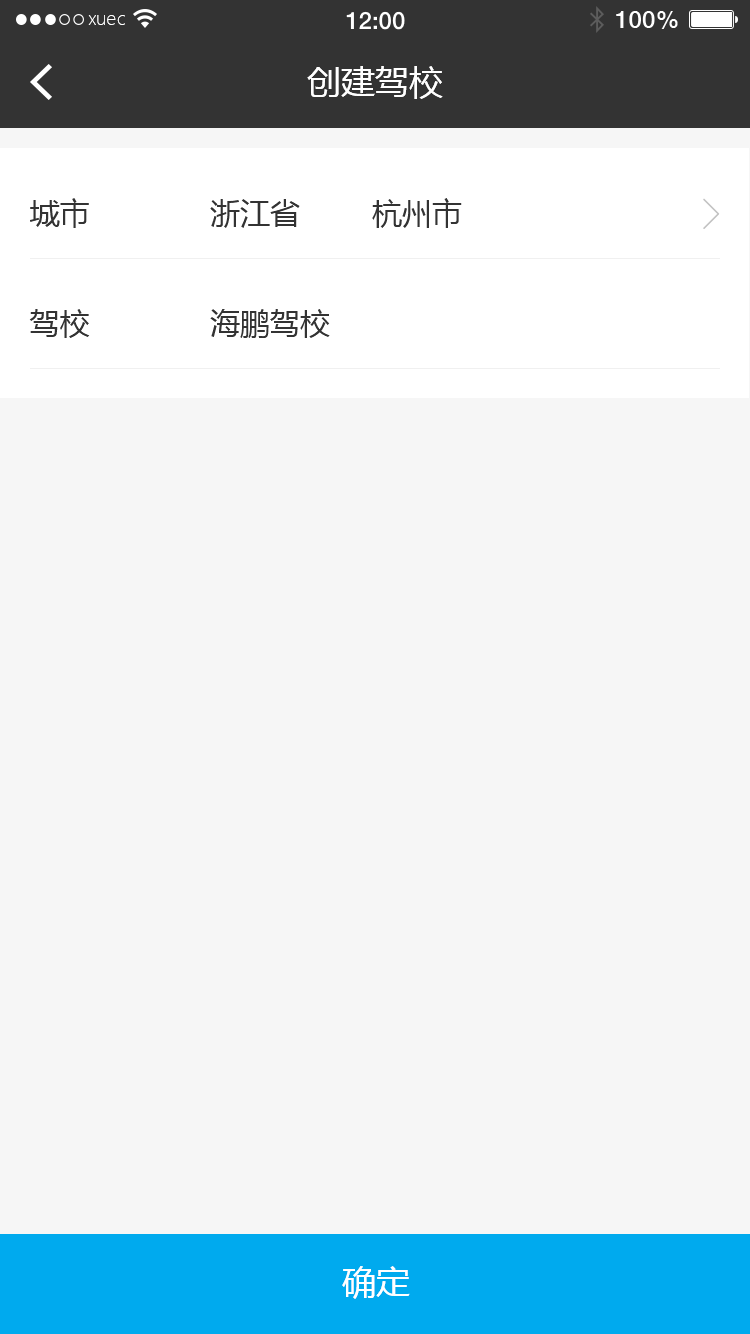
<style>
.page{position:relative;width:750px;height:1334px;background:#f6f6f6}
.page>*{position:absolute;margin:0}
.t1{font:18px "MicrosoftYaHeiLight";color:#ffffff}
.t2{font:34px "MicrosoftYaHei";color:#ffffff}
.t3{font:30px "MicrosoftYaHei";color:#333333}
</style>
<div class="page">
<p class="t1" style="left:88px;top:15px;width:37px;height:10px">xuec</p>
<p class="t2" style="left:307px;top:66px;width:136px;height:33px">创建驾校</p>
<p class="t3" style="left:30px;top:198px;width:59px;height:30px">城市</p>
<p class="t3" style="left:210px;top:198px;width:252px;height:30px">浙江省        杭州市</p>
<p class="t3" style="left:29px;top:309px;width:61px;height:29px">驾校</p>
<p class="t3" style="left:210px;top:309px;width:120px;height:29px">海鹏驾校</p>
<p class="t2" style="left:342px;top:1266px;width:68px;height:33px">确定</p>
</div>
